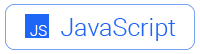
<style>
.page{position:relative;width:200px;height:54px;background:#ffffff}
.page>*{position:absolute;margin:0}
.t1{font:15px "Roboto-Light";color:#ffffff}
.t2{font:25px "Roboto-Light";color:#1e66f5}
</style>
<div class="page">
<p class="t1" style="left:30px;top:25px;width:17px;height:11px">JS</p>
<p class="t2" style="left:61px;top:18px;width:115px;height:23px">JavaScript</p>
</div>
